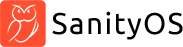
<style>
.page{position:relative;width:183px;height:47px;background:#ffffff}
.page>*{position:absolute;margin:0}
.t1{font:30px "Ubuntu";letter-spacing:0.045em;color:#020000}
</style>
<div class="page">
<p class="t1" style="left:52px;top:11px;width:131px;height:29px">SanityOS</p>
</div>
